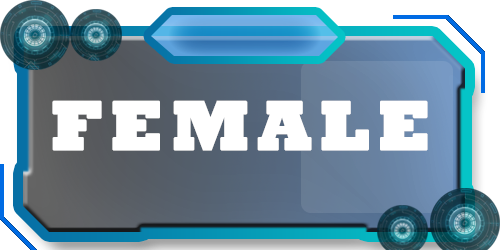
<style>
.page{position:relative;width:500px;height:250px}
.page>*{position:absolute;margin:0}
.t1{font:70px "Rockwell-ExtraBold";letter-spacing:0.1em;color:#ffffff;font-weight:bold}
</style>
<div class="page">
<p class="t1" style="left:52px;top:100px;width:376px;height:51px">FEMALE</p>
</div>
